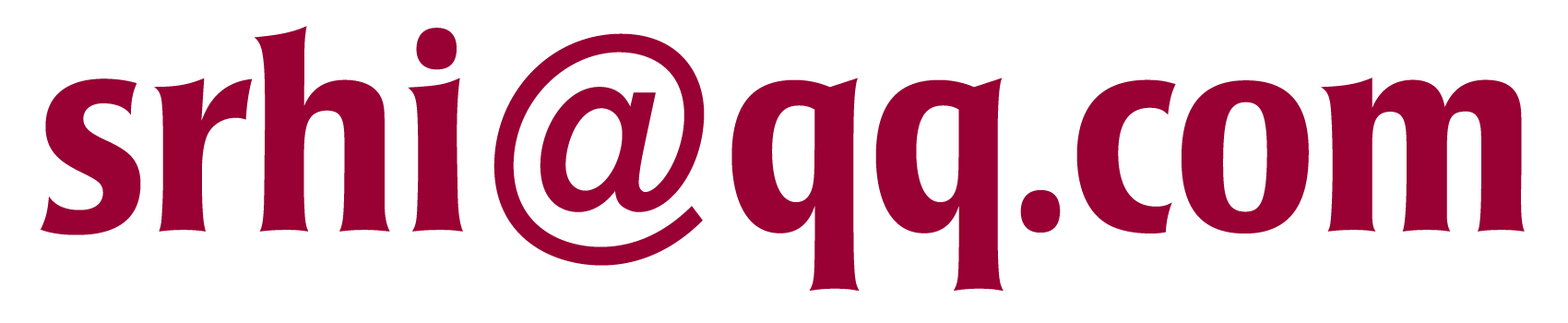
<style>
.page{position:relative;width:1568px;height:323px;background:#ffffff}
.page>*{position:absolute;margin:0}
.t1{font:276.7px "PopplLaudatio-MediumCondensed";color:#990033}
</style>
<div class="page">
<p class="t1" style="left:41px;top:26px;width:1484px;height:265px">srhi@qq.com</p>
</div>
